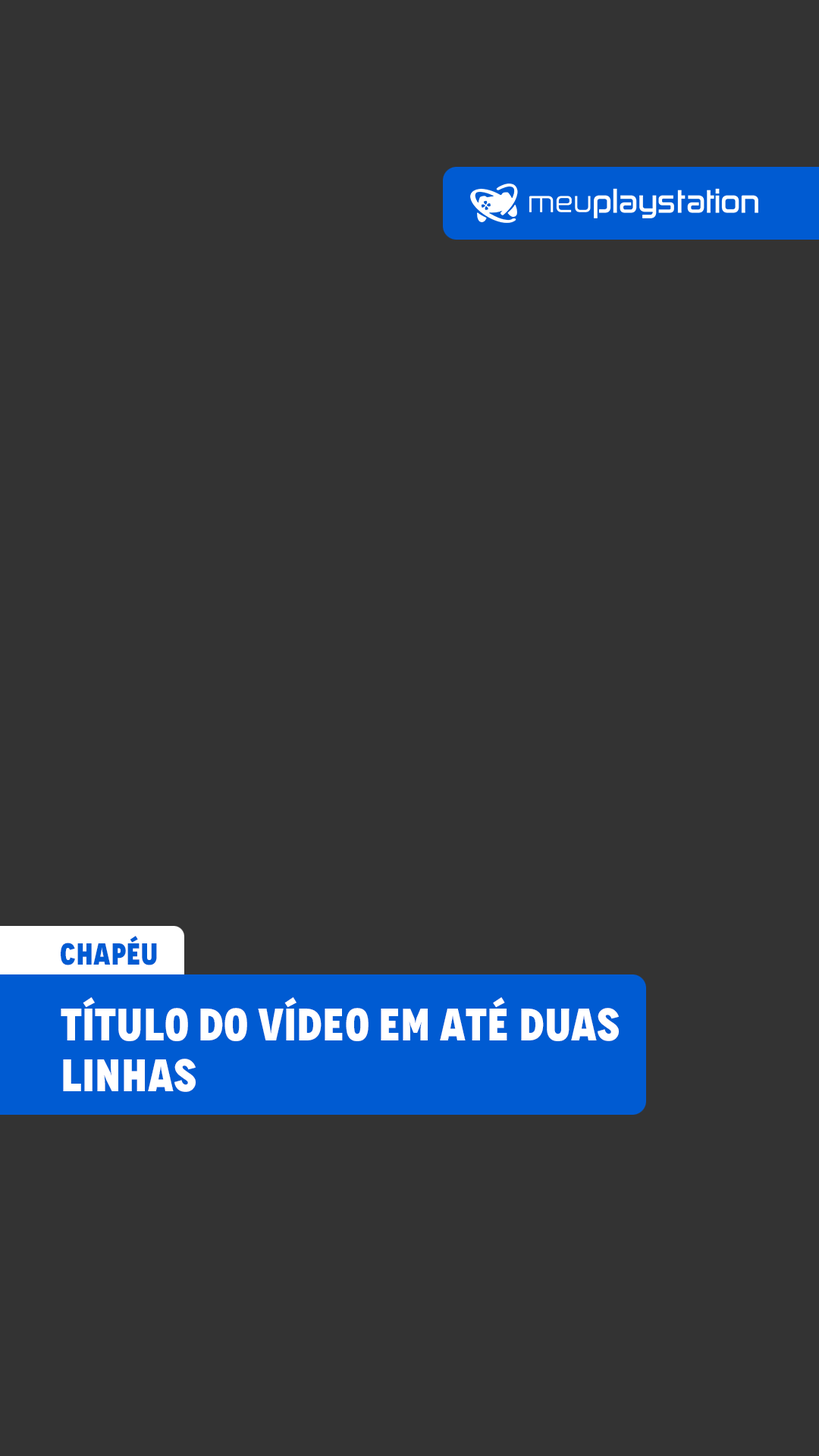
<style>
.page{position:relative;width:819px;height:1456px;background:#333333}
.page>*{position:absolute;margin:0}
.t1{font:30.3px "Novecento-CondUltraBold";color:#005bd2}
.t2{font:45.5px/50.8px "Novecento-CondUltraBold";color:#ffffff}
</style>
<div class="page">
<p class="t1" style="left:61px;top:936px;width:96px;height:29px">CHAPÉU</p>
<p class="t2" style="left:61px;top:997px;width:558px;height:95px">TÍTULO DO VÍDEO EM ATÉ DUAS LINHAS</p>
</div>
